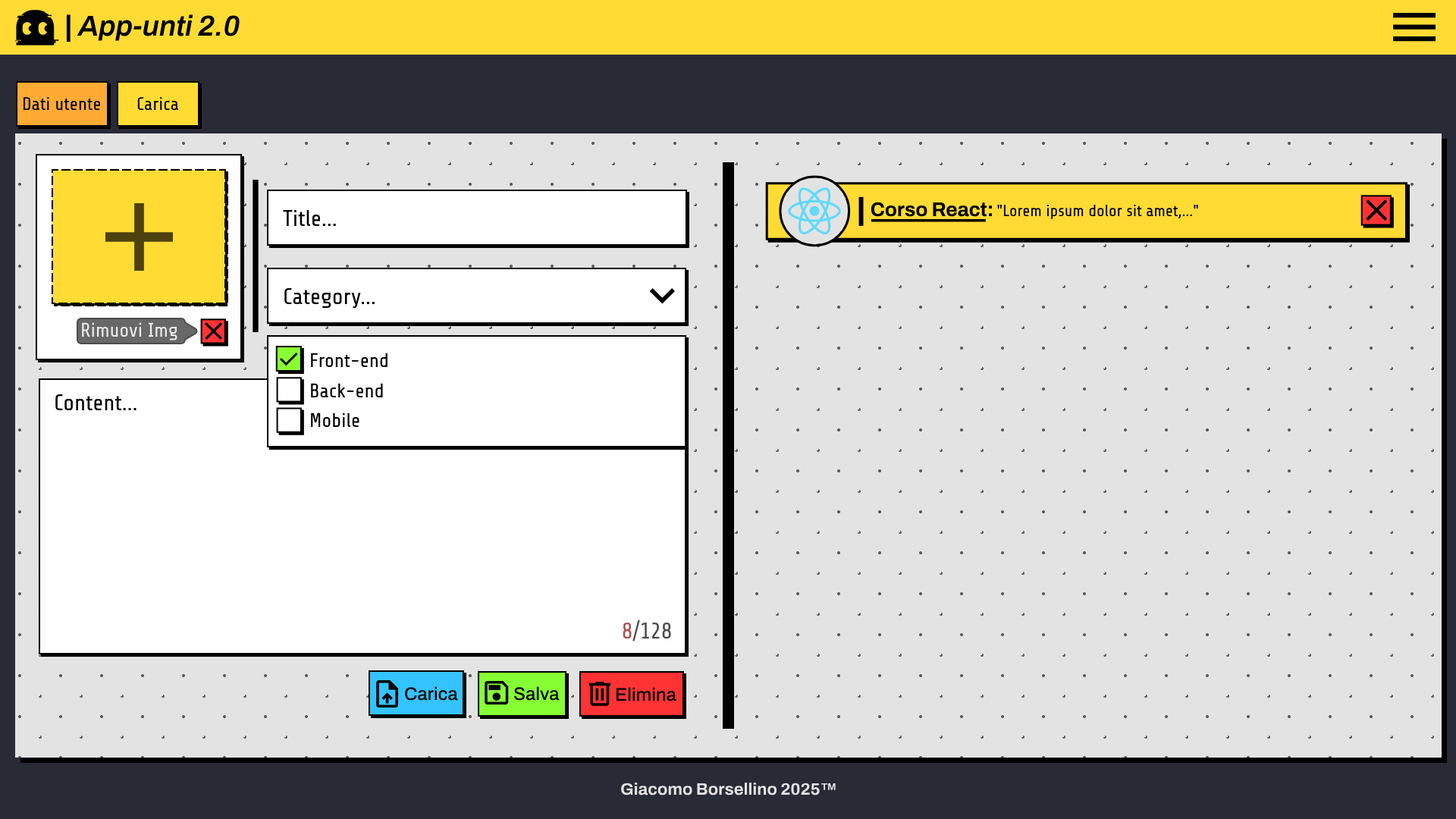
<style>
.page{position:relative;width:1456px;height:819px;background:#e3e3e3}
.page>*{position:absolute;margin:0}
.t1{font:28.8px "Archivo-SemiBoldItalic";color:#000000}
.t2{font:28.8px "ArchivoBlack-Regular";color:#000000}
.t3{font:18.2px "Share-Tech";color:#000000}
.t4{font:19.8px "Archivo-Bold";color:#000000}
.t5{font:16.3px "Share-Tech";color:#000000}
.t6{font:22.7px "Share-Tech";color:#000000}
.t7{font:19.7px "Share-Tech";color:#ffffff}
.t8{font:19.7px "Share-Tech";color:#000000}
.t9{font:22.7px "Share-Tech";color:#4c4c4c}
.t10{font:18.2px "Archivo-Medium";color:#000000}
.t11{font:16.7px "Archivo-Bold";color:#e3e3e3}
</style>
<div class="page">
<p class="t1" style="left:66px;top:14px;width:174px;height:28px"><span class="t2">| </span>App-unti 2.0</p>
<p class="t3" style="left:24px;top:97px;width:76px;height:13px">Dati utente</p>
<p class="t3" style="left:137px;top:97px;width:42px;height:13px">Carica</p>
<p class="t4" style="left:871px;top:202px;width:121px;height:15px">Corso React:</p>
<p class="t5" style="left:997px;top:205px;width:201px;height:14px">"Lorem ipsum dolor sit amet,..."</p>
<p class="t6" style="left:283px;top:210px;width:53px;height:16px">Title...</p>
<p class="t6" style="left:284px;top:288px;width:91px;height:21px">Category...</p>
<p class="t7" style="left:82px;top:322px;width:95px;height:18px;opacity:0.88">Rimuovi Img</p>
<p class="t8" style="left:311px;top:353px;width:77px;height:14px">Front-end</p>
<p class="t8" style="left:311px;top:383px;width:72px;height:14px">Back-end</p>
<p class="t6" style="left:55px;top:394px;width:81px;height:16px">Content...</p>
<p class="t8" style="left:311px;top:413px;width:48px;height:14px">Mobile</p>
<p class="t9" style="left:623px;top:620px;width:48px;height:22px">8/128</p>
<p class="t10" style="left:405px;top:686px;width:53px;height:15px">Carica</p>
<p class="t10" style="left:514px;top:686px;width:46px;height:15px">Salva</p>
<p class="t10" style="left:616px;top:687px;width:60px;height:14px">Elimina</p>
<p class="t11" style="left:621px;top:783px;width:215px;height:12px">Giacomo Borsellino 2025™</p>
</div>
